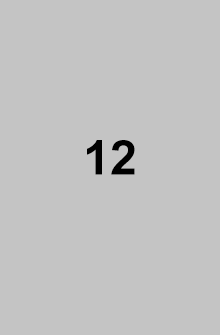
<style>
.page{position:relative;width:220px;height:335px;background:#c4c4c4}
.page>*{position:absolute;margin:0}
.t1{font:48px "Arial-BoldMT";color:#000000}
</style>
<div class="page">
<p class="t1" style="left:87px;top:140px;width:48px;height:35px">12</p>
</div>
